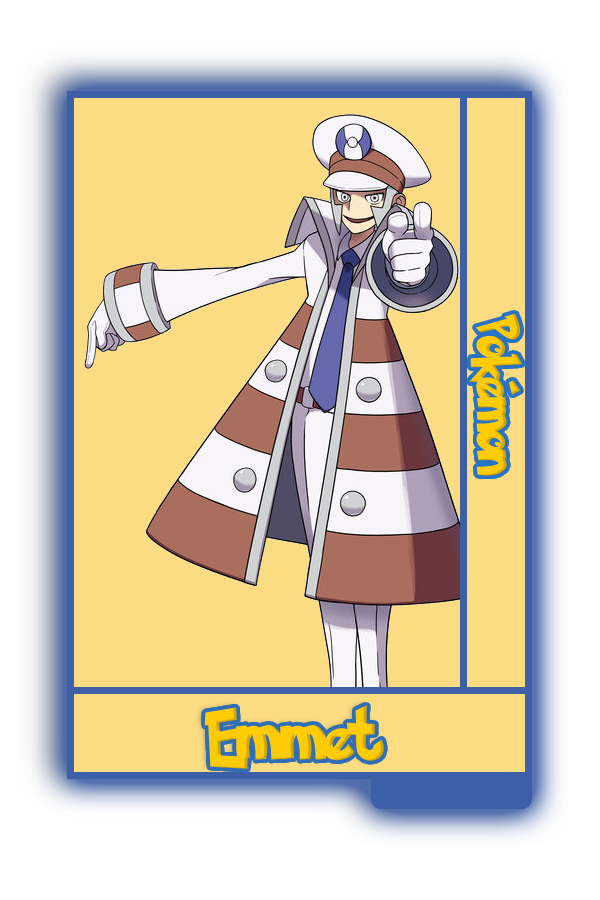
<style>
.page{position:relative;width:600px;height:900px;background:#fbdc83}
.page>*{position:absolute;margin:0}
.t1{font:48.8px "PokemonSolidNormal";color:#ffcb05;scale:0.8 1}
.t2{font:56.6px "PokemonSolidNormal";color:#ffcb05;scale:0.92 1}
</style>
<div class="page">
<p class="t1" style="left:469px;top:313px;width:54px;height:163px;rotate:90deg">Pokémon</p>
<p class="t2" style="left:204px;top:705px;width:180px;height:64px">Emmet</p>
</div>
